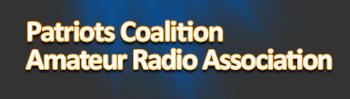
<style>
.page{position:relative;width:350px;height:99px;background:#333333}
.page>*{position:absolute;margin:0}
.t1{font:30px "Calibri-Bold";letter-spacing:-0.035em;color:#ffffff}
</style>
<div class="page">
<p class="t1" style="left:28px;top:20px;width:195px;height:22px">Patriots Coalition</p>
<p class="t1" style="left:26px;top:48px;width:306px;height:22px">Amateur Radio Association</p>
</div>
